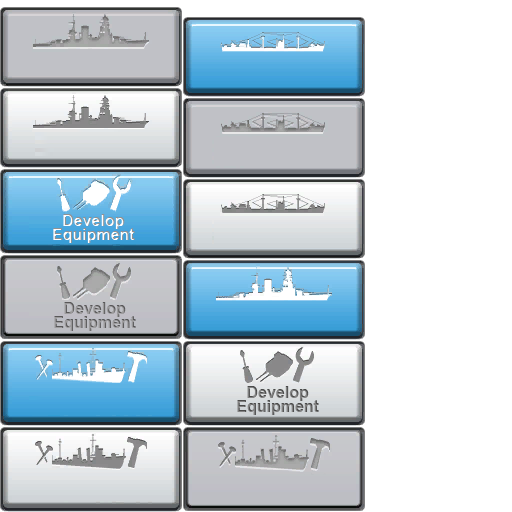
<style>
.page{position:relative;width:512px;height:512px;background:#ffffff}
.page>*{position:absolute;margin:0}
.t1{font:15.8px/14px "Arial-BoldMT"}
</style>
<div class="page">
<p class="t1" style="left:53px;top:214px;width:82px;height:29px;text-align:center">Develop<br>Equipment</p>
<p class="t1" style="left:54px;top:302px;width:82px;height:29px;text-align:center">Develop<br>Equipment</p>
<p class="t1" style="left:237px;top:386px;width:82px;height:29px;text-align:center">Develop<br>Equipment</p>
</div>
